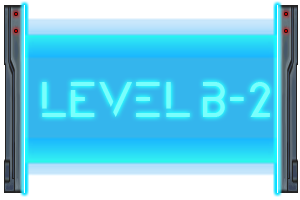
<style>
.page{position:relative;width:300px;height:200px;background:#ffffff}
.page>*{position:absolute;margin:0}
.t1{font:48px "ZELDA";color:#7afefc}
</style>
<div class="page">
<p class="t1" style="left:42px;top:82px;width:228px;height:35px">LEvel B-2</p>
</div>
